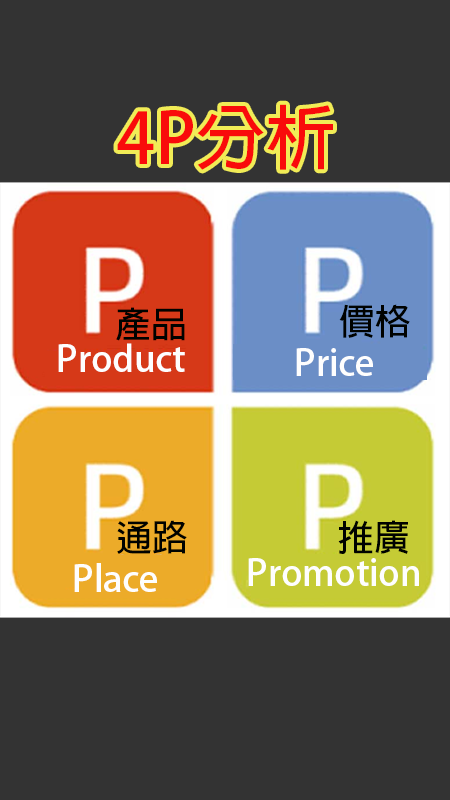
<style>
.page{position:relative;width:450px;height:800px;background:#333333}
.page>*{position:absolute;margin:0}
.t1{font:70px "AdobeFanHeitiStd-Bold";color:#f90b0b}
.t2{font:36px "AdobeFanHeitiStd-Bold";color:#000200}
.t3{font:36px "AdobeFanHeitiStd-Bold";color:#fefefe}
</style>
<div class="page">
<p class="t1" style="left:117px;top:104px;width:216px;height:66px">4P分析</p>
<p class="t2" style="left:339px;top:304px;width:71px;height:34px">價格</p>
<p class="t2" style="left:116px;top:307px;width:69px;height:34px">產品</p>
<p class="t3" style="left:58px;top:343px;width:127px;height:29px">Product</p>
<p class="t3" style="left:296px;top:348px;width:77px;height:28px">Price</p>
<p class="t2" style="left:117px;top:520px;width:70px;height:34px">通路</p>
<p class="t2" style="left:338px;top:520px;width:70px;height:34px">推廣</p>
<p class="t3" style="left:248px;top:558px;width:171px;height:28px">Promotion</p>
<p class="t3" style="left:74px;top:563px;width:83px;height:29px">Place</p>
</div>
